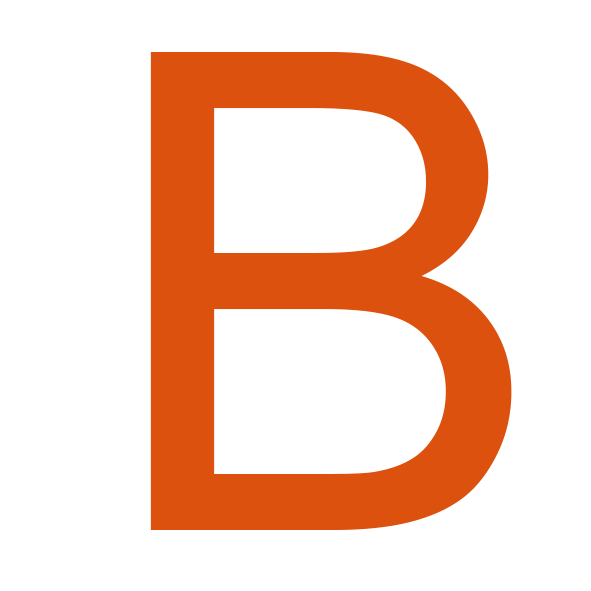
<style>
.page{position:relative;width:591px;height:591px;background:#ffffff}
.page>*{position:absolute;margin:0}
.t1{font:666.7px "ArialMT";color:#db510d}
</style>
<div class="page">
<p class="t1" style="left:150px;top:52px;width:362px;height:478px">В</p>
</div>
